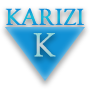
<style>
.page{position:relative;width:90px;height:90px;background:#ffffff}
.page>*{position:absolute;margin:0}
.t1{font:24px "GoudyOldStyleT-Regular";font-weight:bold}
.t2{font:34px "GoudyOldStyleT-Regular";font-weight:bold}
</style>
<div class="page">
<p class="t1" style="left:5px;top:8px;width:79px;height:18px">KARIZI</p>
<p class="t2" style="left:33px;top:33px;width:23px;height:24px">K</p>
</div>
